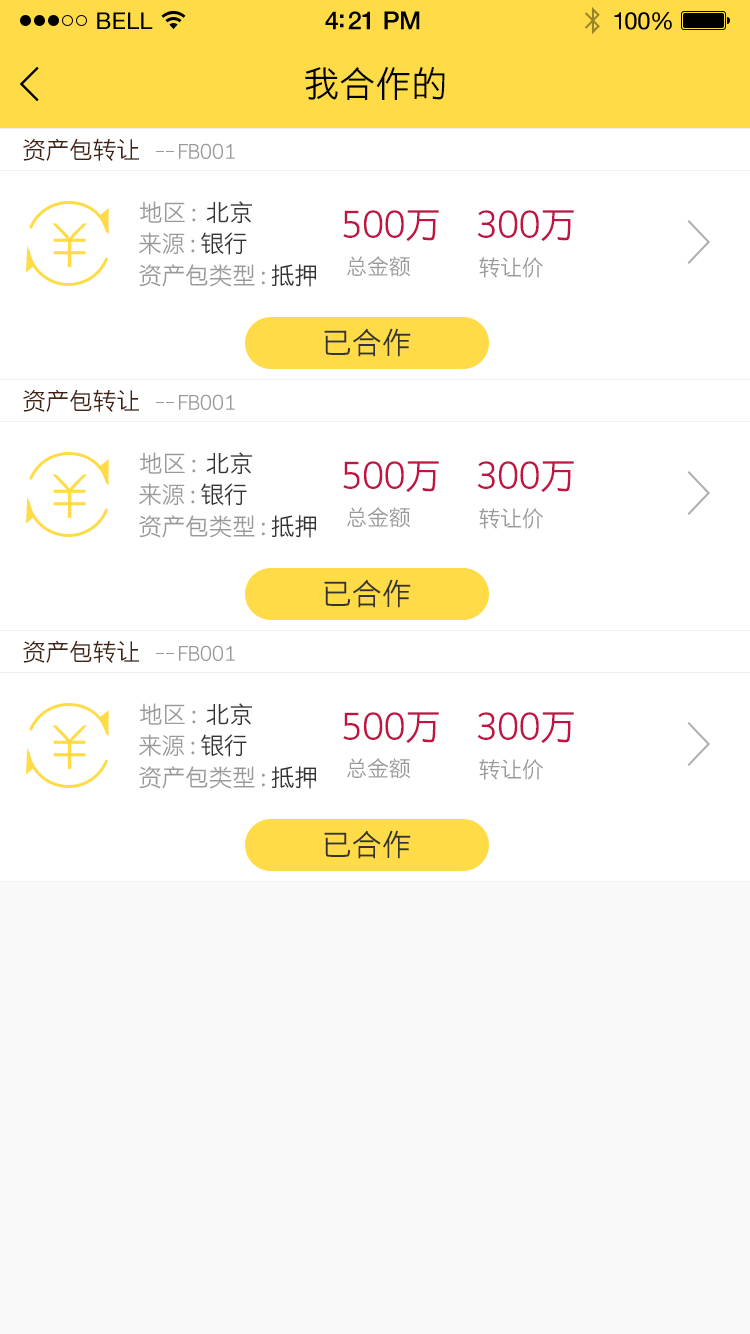
<style>
.page{position:relative;width:750px;height:1334px;background:#ffffff}
.page>*{position:absolute;margin:0}
.t1{font:23px "HelveticaNeue";letter-spacing:0.02em;color:#000000}
.t2{font:25px "HelveticaNeue-Medium";letter-spacing:-0.02em;color:#000000}
.t3{font:24px "HelveticaNeue";letter-spacing:-0.02em;color:#010101}
.t4{font:36px "STHeitiSC-Light";color:#000000}
.t5{font:24px "STHeitiSC-Light";letter-spacing:-0.02em;color:#41210f}
.t6{font:20px "STHeitiSC-Light";letter-spacing:-0.02em;color:#999999}
.t7{font:24px "STHeitiSC-Light";letter-spacing:-0.02em;color:#999999}
.t8{font:24px "STHeitiSC-Light";letter-spacing:-0.02em;color:#333333}
.t9{font:36px "STHeitiSC-Light";letter-spacing:-0.02em;color:#c01444}
.t10{font:22px "STHeitiSC-Light";letter-spacing:-0.02em;color:#999999}
.t11{font:30px "STHeitiSC-Light";color:#333333}
</style>
<div class="page">
<p class="t1" style="left:97px;top:12px;width:56px;height:17px">BELL</p>
<p class="t1" style="left:97px;top:12px;width:56px;height:17px">BELL</p>
<p class="t2" style="left:325px;top:11px;width:95px;height:19px">4:21 PM</p>
<p class="t2" style="left:325px;top:11px;width:95px;height:19px">4:21 PM</p>
<p class="t3" style="left:614px;top:12px;width:58px;height:18px">100%</p>
<p class="t3" style="left:614px;top:12px;width:58px;height:18px">100%</p>
<p class="t4" style="left:305px;top:67px;width:140px;height:33px">我合作的</p>
<p class="t5" style="left:23px;top:138px;width:116px;height:23px">资产包转让</p>
<p class="t6" style="left:179px;top:143px;width:56px;height:16px">FB001</p>
<p class="t7" style="left:140px;top:201px;width:112px;height:23px">地区 :  <span class="t8">北京</span></p>
<p class="t9" style="left:343px;top:210px;width:96px;height:32px">500万</p>
<p class="t9" style="left:477px;top:210px;width:97px;height:32px">300万</p>
<p class="t7" style="left:139px;top:232px;width:108px;height:23px">来源 : <span class="t8">银行</span></p>
<p class="t10" style="left:347px;top:256px;width:63px;height:21px">总金额</p>
<p class="t10" style="left:479px;top:257px;width:64px;height:21px">转让价</p>
<p class="t7" style="left:139px;top:264px;width:177px;height:23px">资产包类型 : <span class="t8">抵押</span></p>
<p class="t11" style="left:324px;top:328px;width:87px;height:29px">已合作</p>
<p class="t5" style="left:23px;top:389px;width:116px;height:23px">资产包转让</p>
<p class="t6" style="left:179px;top:394px;width:56px;height:16px">FB001</p>
<p class="t7" style="left:140px;top:452px;width:112px;height:23px">地区 :  <span class="t8">北京</span></p>
<p class="t9" style="left:343px;top:461px;width:96px;height:32px">500万</p>
<p class="t9" style="left:477px;top:461px;width:97px;height:32px">300万</p>
<p class="t7" style="left:139px;top:483px;width:108px;height:23px">来源 : <span class="t8">银行</span></p>
<p class="t10" style="left:347px;top:507px;width:63px;height:21px">总金额</p>
<p class="t10" style="left:479px;top:508px;width:64px;height:21px">转让价</p>
<p class="t7" style="left:139px;top:515px;width:177px;height:23px">资产包类型 : <span class="t8">抵押</span></p>
<p class="t11" style="left:324px;top:579px;width:87px;height:29px">已合作</p>
<p class="t5" style="left:23px;top:640px;width:116px;height:23px">资产包转让</p>
<p class="t6" style="left:179px;top:645px;width:56px;height:16px">FB001</p>
<p class="t7" style="left:140px;top:703px;width:112px;height:23px">地区 :  <span class="t8">北京</span></p>
<p class="t9" style="left:343px;top:712px;width:96px;height:32px">500万</p>
<p class="t9" style="left:477px;top:712px;width:97px;height:32px">300万</p>
<p class="t7" style="left:139px;top:734px;width:108px;height:23px">来源 : <span class="t8">银行</span></p>
<p class="t10" style="left:347px;top:758px;width:63px;height:21px">总金额</p>
<p class="t10" style="left:479px;top:759px;width:64px;height:21px">转让价</p>
<p class="t7" style="left:139px;top:766px;width:177px;height:23px">资产包类型 : <span class="t8">抵押</span></p>
<p class="t11" style="left:324px;top:830px;width:87px;height:29px">已合作</p>
</div>
